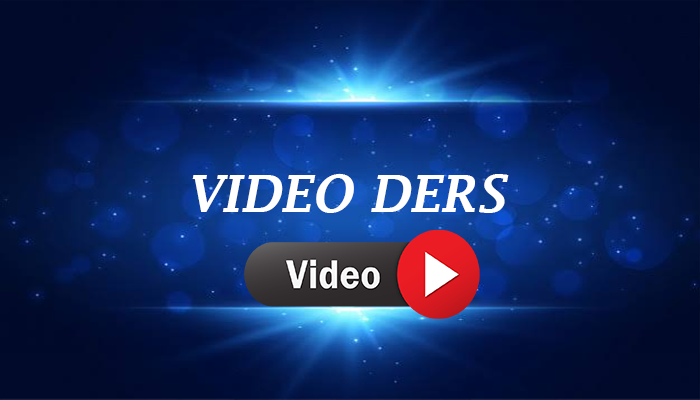
<style>
.page{position:relative;width:700px;height:400px}
.page>*{position:absolute;margin:0}
.t1{font:50px "LucidaFax-DemiItalic";color:#ffffff}
</style>
<div class="page">
<p class="t1" style="left:192px;top:174px;width:317px;height:39px">VIDEO DERS</p>
</div>
